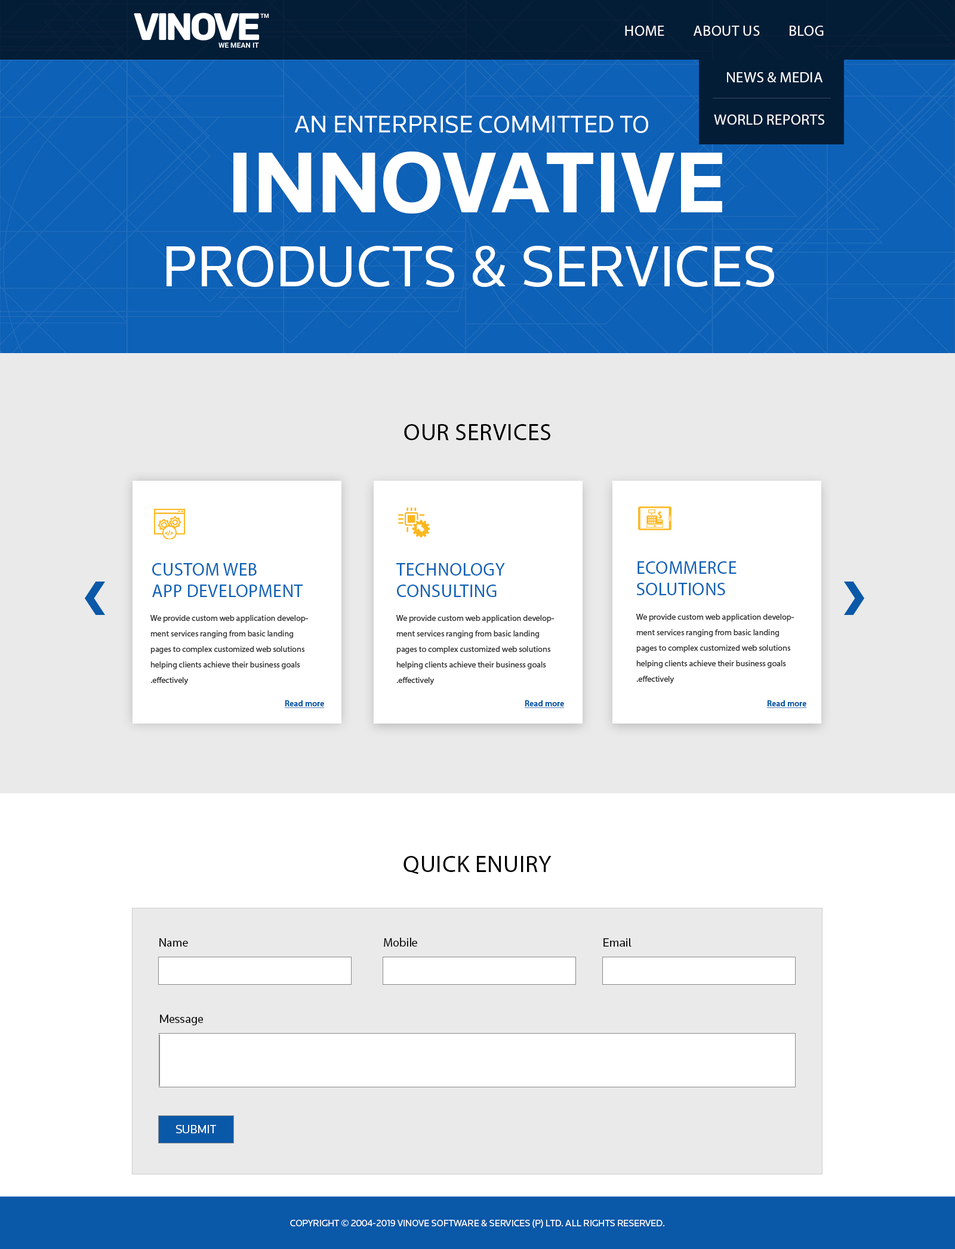
<style>
.page{position:relative;width:955px;height:1249px;background:#ffffff}
.page>*{position:absolute;margin:0}
.t1{font:14.9px "MyriadPro-Regular";color:#ffffff;text-transform:uppercase}
.t2{font:25.1px "Knowledge-Regular";color:#ffffff;text-transform:uppercase}
.t3{font:89.5px "Knowledge-Bold";color:#ffffff;text-transform:uppercase}
.t4{font:59.7px "Knowledge-Regular";color:#ffffff;text-transform:uppercase}
.t5{font:23.9px "MyriadPro-Regular";color:#000000;text-transform:uppercase}
.t6{font:17.9px "MyriadPro-Regular";color:#0d61b7;text-transform:uppercase}
.t7{font:8.4px/15.5px "MyriadHebrew-Regular";color:#363636}
.t8{font:8.4px "MyriadHebrew-Regular";color:#0a58a8;font-weight:bold;text-decoration:underline}
.t9{font:11.9px "MyriadPro-Regular";color:#000000}
.t10{font:11.9px "Knowledge-Regular";color:#000000}
.t11{font:12.1px "Knowledge-Regular";color:#fefefe}
.t12{font:9.5px "Knowledge-Regular";color:#ffffff;text-transform:uppercase}
</style>
<div class="page">
<p class="t1" style="left:625px;top:26px;width:198px;height:10px">HOME         ABOUT US         BLOG</p>
<p class="t1" style="left:727px;top:72px;width:95px;height:10px">News &amp; media</p>
<p class="t2" style="left:294px;top:116px;width:354px;height:17px">AN ENTERPRISE COMMITTED TO</p>
<p class="t1" style="left:714px;top:115px;width:110px;height:10px">World reports</p>
<p class="t3" style="left:233px;top:152px;width:489px;height:62px">INNOVATIVE</p>
<p class="t4" style="left:166px;top:246px;width:608px;height:41px">PRODUCTS &amp; SERVICES</p>
<p class="t5" style="left:404px;top:424px;width:146px;height:16px">Our SERVICES</p>
<p class="t6" style="left:152px;top:563px;width:151px;height:34px">Custom Web <br>App Development</p>
<p class="t6" style="left:396px;top:563px;width:109px;height:34px">Technology <br>Consulting</p>
<p class="t6" style="left:636px;top:561px;width:100px;height:34px">eCommerce <br>Solutions</p>
<p class="t7" style="left:150px;top:615px;width:158px;height:70px;text-align:right">We provide custom web application development services ranging from basic landing pages to complex customized web solutions helping clients achieve their business goals effectively.</p>
<p class="t7" style="left:396px;top:615px;width:158px;height:70px;text-align:right">We provide custom web application development services ranging from basic landing pages to complex customized web solutions helping clients achieve their business goals effectively.</p>
<p class="t7" style="left:636px;top:614px;width:158px;height:70px;text-align:right">We provide custom web application development services ranging from basic landing pages to complex customized web solutions helping clients achieve their business goals effectively.</p>
<p class="t8" style="left:284px;top:700px;width:41px;height:8px">Read more</p>
<p class="t8" style="left:524px;top:700px;width:40px;height:8px">Read more</p>
<p class="t8" style="left:766px;top:700px;width:41px;height:8px">Read more</p>
<p class="t5" style="left:403px;top:856px;width:148px;height:19px">quick enuiry</p>
<p class="t9" style="left:159px;top:938px;width:29px;height:9px">Name</p>
<p class="t9" style="left:384px;top:938px;width:33px;height:9px">Mobile</p>
<p class="t10" style="left:603px;top:938px;width:28px;height:9px">Email</p>
<p class="t10" style="left:160px;top:1015px;width:43px;height:11px">Message</p>
<p class="t11" style="left:176px;top:1125px;width:40px;height:9px">SUBMIT</p>
<p class="t12" style="left:290px;top:1219px;width:375px;height:9px">Copyright © 2004-2019 Vinove Software &amp; Services (P) Ltd. All Rights Reserved.</p>
</div>
